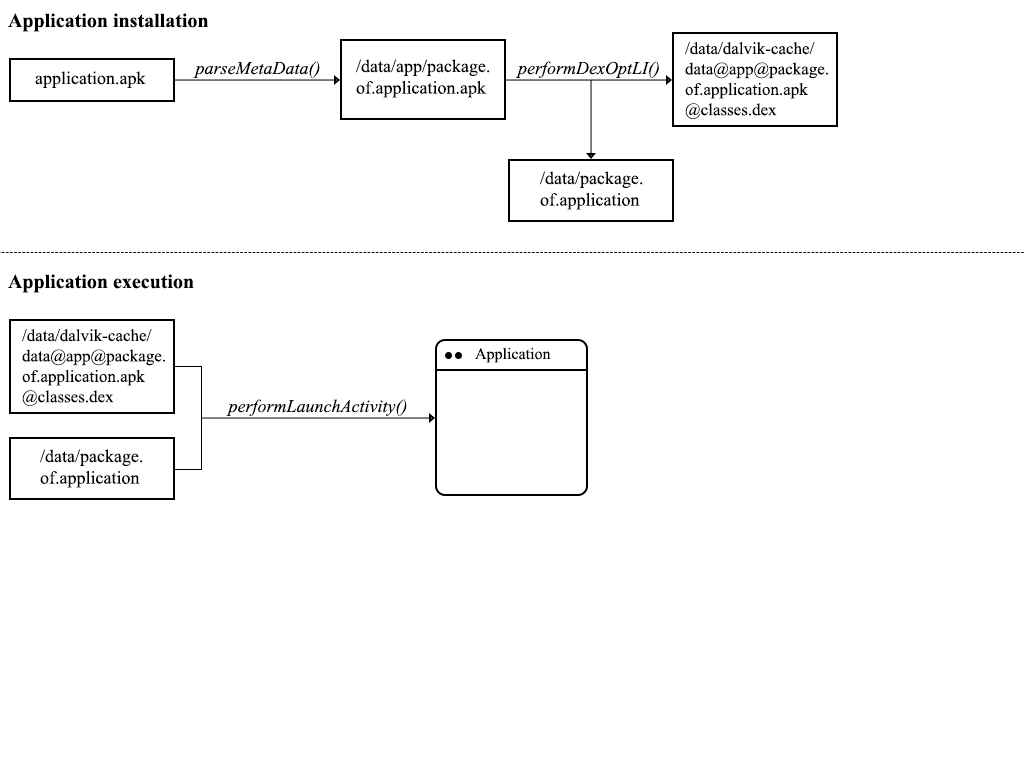
<style>
.page{position:relative;width:1024px;height:768px;background:#ffffff}
.page>*{position:absolute;margin:0}
.t1{font:20px "TimesNewRomanPS-BoldMT";color:#000000}
.t2{font:17px "TimesNewRomanPSMT";color:#000000}
.t3{font:18px "TimesNewRomanPS-ItalicMT";color:#000000}
.t4{font:18px "TimesNewRomanPSMT";color:#000000}
.t5{font:16px "TimesNewRomanPSMT";color:#000000}
</style>
<div class="page">
<p class="t1" style="left:8px;top:13px;width:201px;height:19px">Application installation</p>
<p class="t2" style="left:685px;top:42px;width:143px;height:77px">/data/dalvik-cache/<br>data@app@package.<br>of.application.apk<br>@classes.dex</p>
<p class="t3" style="left:193px;top:61px;width:127px;height:17px">parseMetaData()</p>
<p class="t4" style="left:356px;top:59px;width:134px;height:39px">/data/app/package.<br>of.application.apk</p>
<p class="t3" style="left:516px;top:61px;width:143px;height:17px">performDexOptLI()</p>
<p class="t4" style="left:35px;top:71px;width:111px;height:17px">application.apk</p>
<p class="t4" style="left:540px;top:171px;width:103px;height:39px">/data/package.<br>of.application</p>
<p class="t1" style="left:8px;top:274px;width:186px;height:19px">Application execution</p>
<p class="t2" style="left:22px;top:329px;width:143px;height:77px">/data/dalvik-cache/<br>data@app@package.<br>of.application.apk<br>@classes.dex</p>
<p class="t5" style="left:475px;top:347px;width:76px;height:16px">Application</p>
<p class="t3" style="left:226px;top:399px;width:181px;height:17px">performLaunchActivity()</p>
<p class="t4" style="left:40px;top:449px;width:103px;height:39px">/data/package.<br>of.application</p>
</div>
